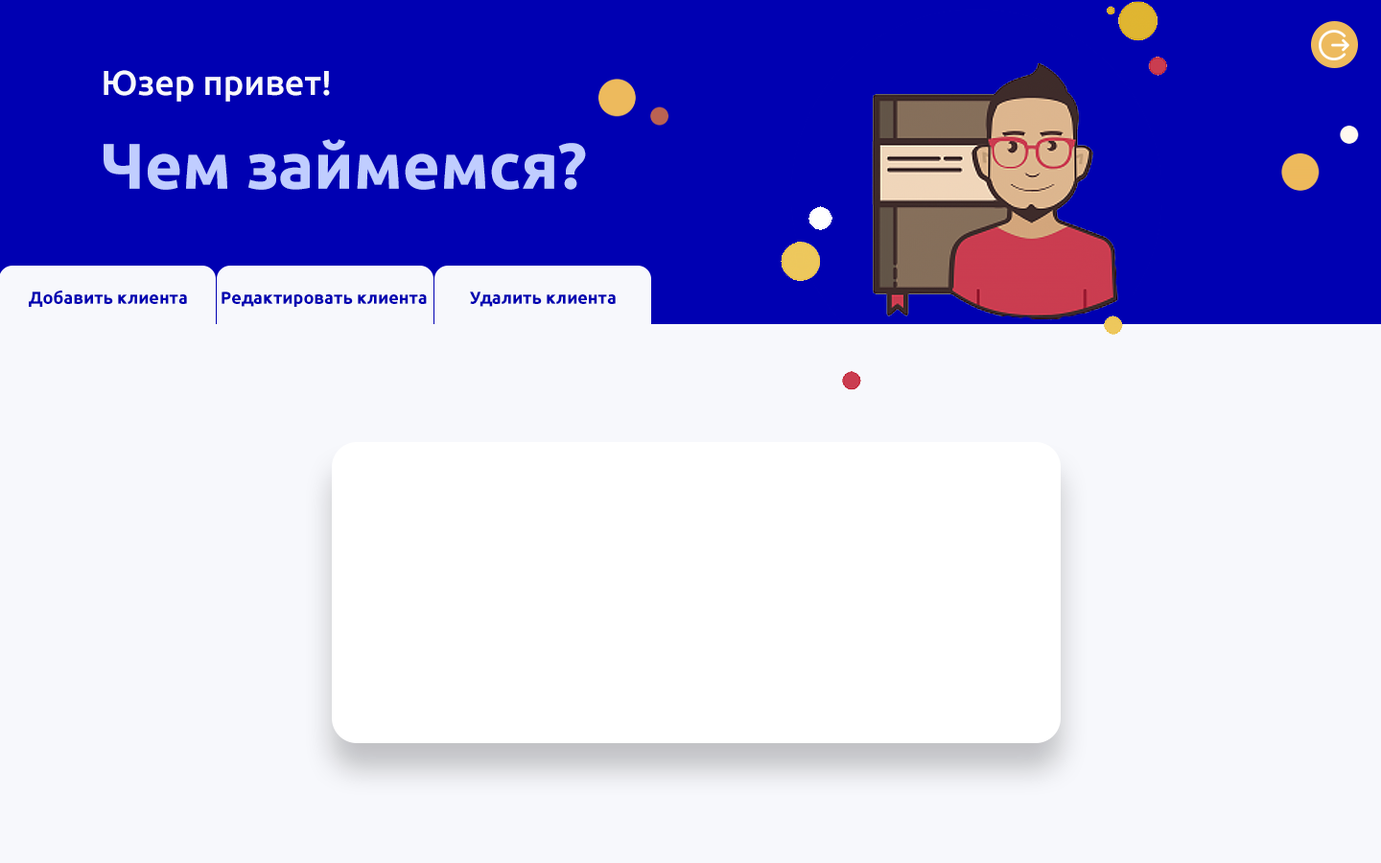
<style>
.page{position:relative;width:1381px;height:863px;background:#f7f8fc}
.page>*{position:absolute;margin:0}
.t1{font:34.5px "Ubuntu-Medium";color:#f7f8fc}
.t2{font:64.3px "Ubuntu-Bold";color:#c0cdff}
.t3{font:17.3px "Ubuntu-Bold";color:#0000b2}
</style>
<div class="page">
<p class="t1" style="left:104px;top:70px;width:226px;height:32px">Юзер привет!</p>
<p class="t2" style="left:104px;top:139px;width:482px;height:51px">Чем займемся?</p>
<p class="t3" style="left:29px;top:290px;width:158px;height:17px">Добавить клиента</p>
<p class="t3" style="left:222px;top:292px;width:205px;height:15px">Редактировать клиента</p>
<p class="t3" style="left:470px;top:292px;width:146px;height:15px">Удалить клиента</p>
</div>
